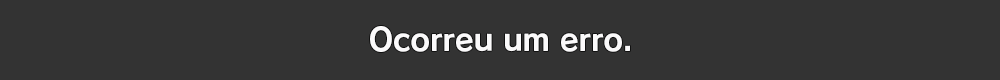
<style>
.page{position:relative;width:1000px;height:80px;background:#333333}
.page>*{position:absolute;margin:0}
.t1{font:30.7px "RodinPro-B";letter-spacing:-0.013em;color:#fbfafb}
</style>
<div class="page">
<p class="t1" style="left:370px;top:26px;width:260px;height:26px">Ocorreu um erro.</p>
</div>
